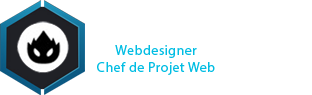
<style>
.page{position:relative;width:312px;height:95px;background:#ffffff}
.page>*{position:absolute;margin:0}
.t1{font:14px "MyriadPro-Regular";letter-spacing:0.03em;color:#01bde3}
</style>
<div class="page">
<p class="t1" style="left:97px;top:45px;width:118px;height:30px;text-align:center">Webdesigner<br>Chef de Projet Web</p>
</div>
